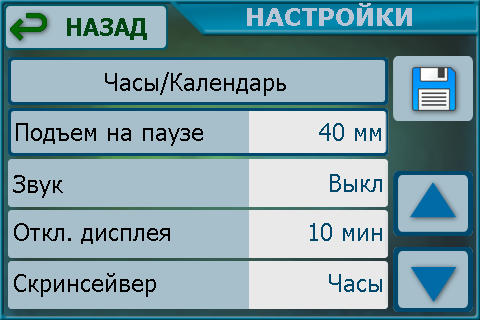
<style>
.page{position:relative;width:480px;height:320px;background:#a6bfcb}
.page>*{position:absolute;margin:0}
.t1{font:24px "Verdana-Bold";color:#bac5d5}
.t2{font:24px "Tahoma-Bold";color:#004612}
.t3{font:24px "Tahoma";color:#000000}
.t4{font:24px "Tahoma";color:#00496c}
</style>
<div class="page">
<p class="t1" style="left:247px;top:3px;width:165px;height:23px">НАСТРОЙКИ</p>
<p class="t2" style="left:67px;top:18px;width:80px;height:22px">НАЗАД</p>
<p class="t3" style="left:105px;top:72px;width:181px;height:24px">Часы/Календарь</p>
<p class="t3" style="left:16px;top:123px;width:187px;height:23px">Подъем на паузе</p>
<p class="t4" style="left:319px;top:123px;width:62px;height:18px">40 мм</p>
<p class="t4" style="left:330px;top:174px;width:52px;height:18px">Выкл</p>
<p class="t3" style="left:13px;top:175px;width:50px;height:23px">Звук</p>
<p class="t3" style="left:14px;top:223px;width:156px;height:21px">Откл. дисплея</p>
<p class="t4" style="left:310px;top:223px;width:72px;height:18px">10 мин</p>
<p class="t3" style="left:14px;top:273px;width:142px;height:24px">Скринсейвер</p>
<p class="t4" style="left:329px;top:274px;width:53px;height:18px">Часы</p>
</div>
